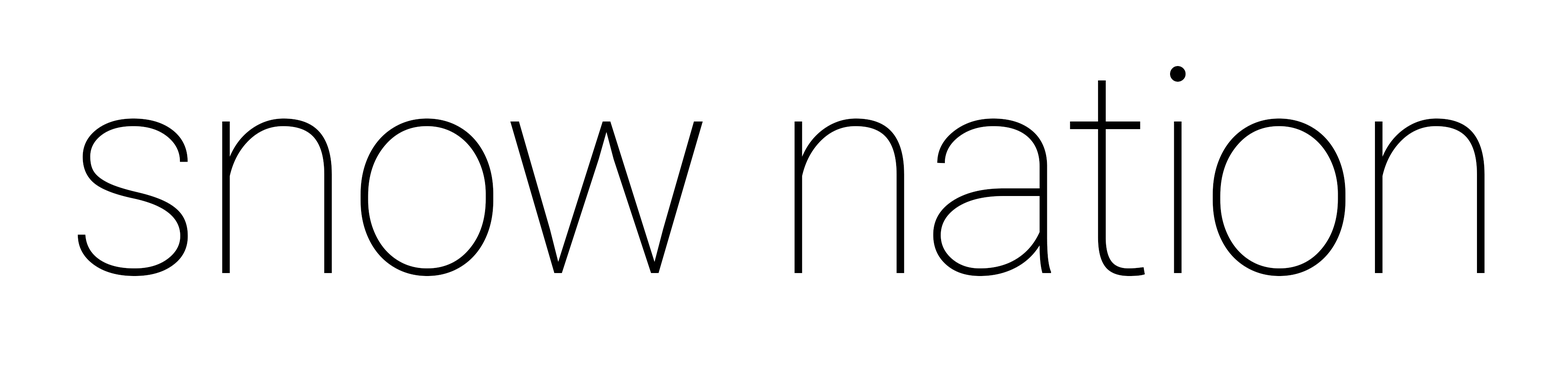
<style>
.page{position:relative;width:1568px;height:392px;background:#ffffff}
.page>*{position:absolute;margin:0}
.t1{font:287px "Roboto-Thin";letter-spacing:-0.025em;color:#000000}
</style>
<div class="page">
<p class="t1" style="left:77px;top:66px;width:1408px;height:210px">snow nation</p>
</div>
